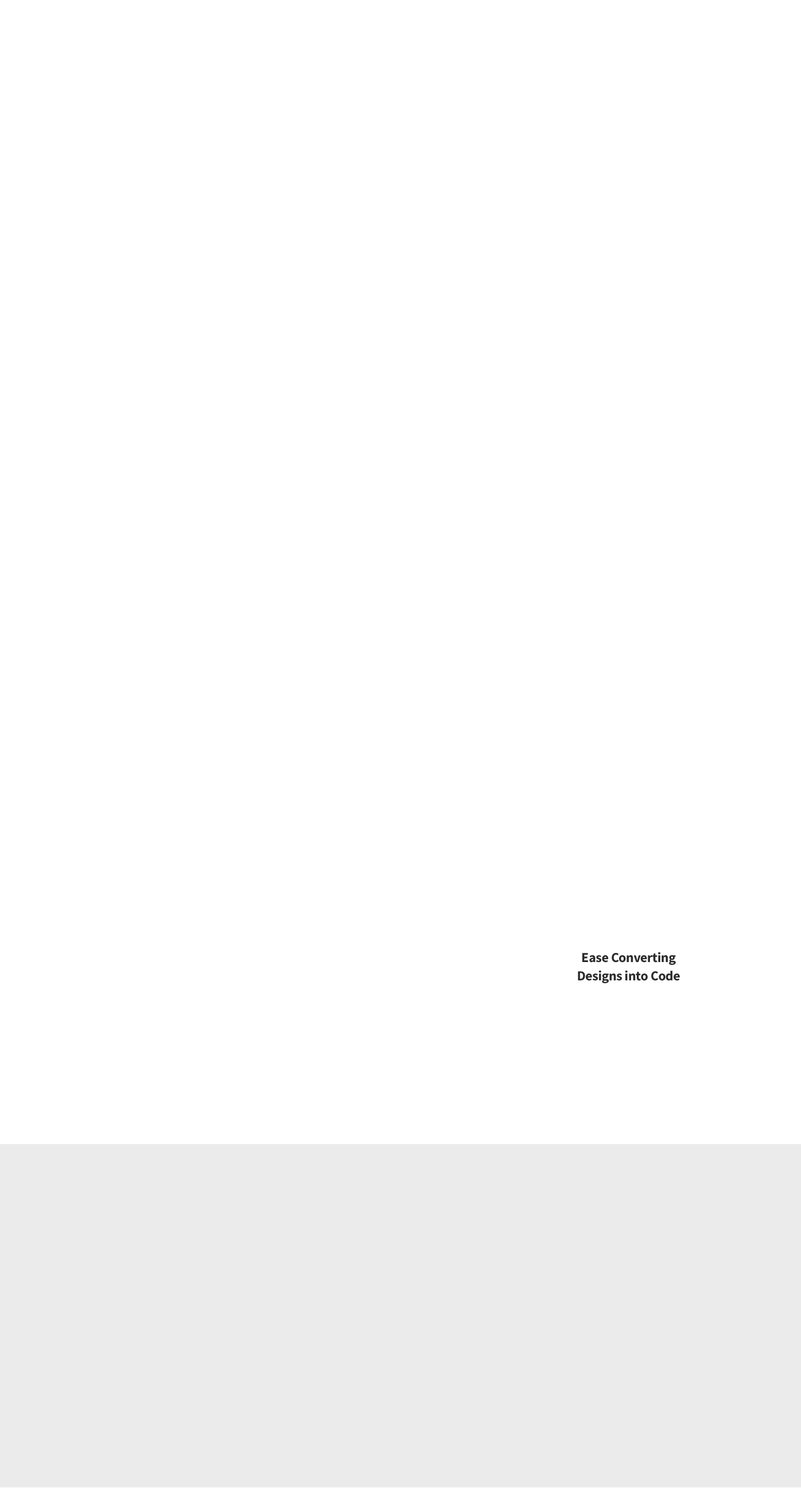
<style>
.page{position:relative;width:801px;height:1488px;background:#ffffff}
.page>*{position:absolute;margin:0}
.t1{font:13.7px/18.3px "SourceSansPro-Bold";letter-spacing:-0.02em;color:#2b2b2b}
</style>
<div class="page">
<p class="t1" style="left:578px;top:952px;width:102px;height:31px;text-align:center">Ease Converting<br>Designs into Code</p>
</div>
